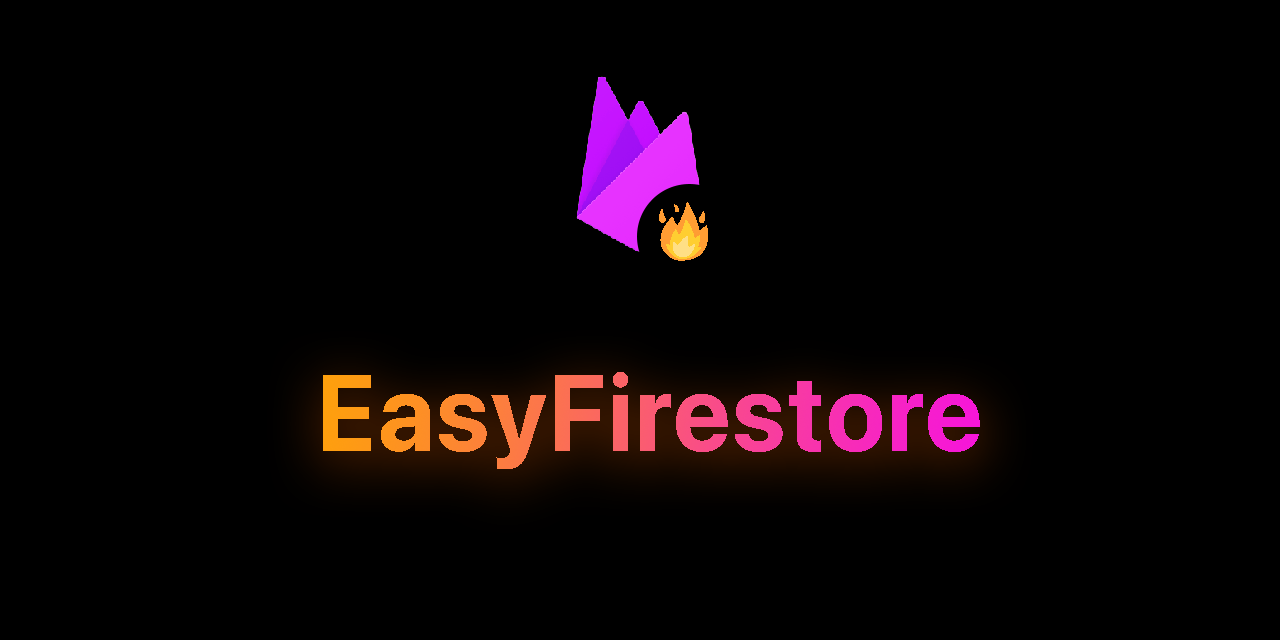
<style>
.page{position:relative;width:1280px;height:640px;background:#000000}
.page>*{position:absolute;margin:0}
.t1{font:107.3px "SFProDisplay-Bold";letter-spacing:0.02em;scale:0.96 1}
</style>
<div class="page">
<p class="t1" style="left:323px;top:372px;width:657px;height:97px">EasyFirestore</p>
</div>
